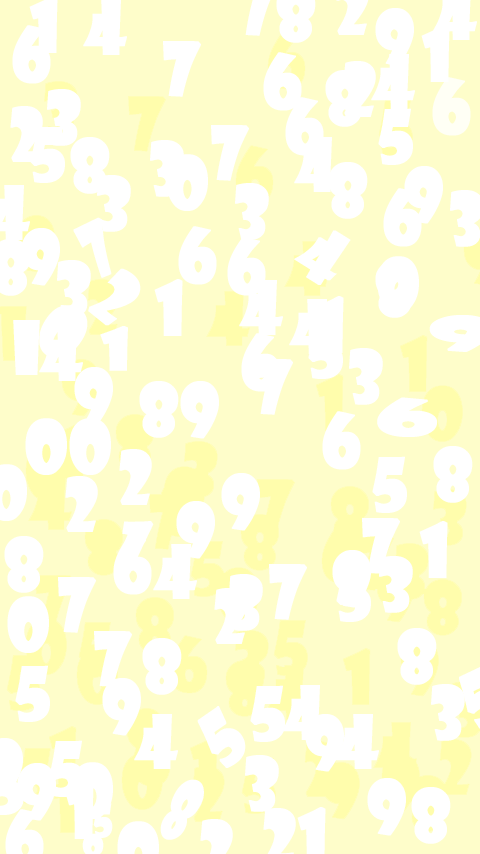
<style>
.page{position:relative;width:480px;height:854px;background:#fefdca}
.page>*{position:absolute;margin:0}
.t1{font:72px "ShowcardGothic-Reg";color:#ffffff;font-weight:bold}
.t2{font:72.3px "ShowcardGothic-Reg";color:#ffffff;font-weight:bold;scale:0.81 1}
.t3{font:56.6px "ShowcardGothic-Reg";color:#ffffff;font-weight:bold;scale:1.27 1}
.t4{font:47.3px "ShowcardGothic-Reg";color:#ffffff;font-weight:bold;scale:2.45 1}
.t5{font:85.3px "ShowcardGothic-Reg";color:#ffffff;font-weight:bold;scale:0.61 1}
.t6{font:44.8px "ShowcardGothic-Reg";color:#ffffff;font-weight:bold;scale:0.86 1}
</style>
<div class="page">
<p class="t1" style="left:83px;top:0px;width:44px;height:55px">4</p>
<p class="t1" style="left:375px;top:8px;width:39px;height:58px">9</p>
<p class="t1" style="left:12px;top:25px;width:39px;height:59px">6</p>
<p class="t1" style="left:421px;top:25px;width:29px;height:57px">1</p>
<p class="t1" style="left:163px;top:41px;width:38px;height:56px">7</p>
<p class="t1" style="left:263px;top:52px;width:39px;height:59px">6</p>
<p class="t1" style="left:371px;top:54px;width:44px;height:55px">4</p>
<p class="t1" style="left:343px;top:61px;width:33px;height:56px">2</p>
<p class="t1" style="left:325px;top:70px;width:40px;height:57px">8</p>
<p class="t1" style="left:432px;top:77px;width:39px;height:59px;opacity:0.8">6</p>
<p class="t1" style="left:47px;top:89px;width:34px;height:57px">3</p>
<p class="t1" style="left:285px;top:97px;width:39px;height:59px">6</p>
<p class="t1" style="left:10px;top:106px;width:33px;height:56px">2</p>
<p class="t1" style="left:378px;top:108px;width:35px;height:57px">5</p>
<p class="t1" style="left:30px;top:126px;width:35px;height:57px">5</p>
<p class="t1" style="left:211px;top:125px;width:38px;height:56px">7</p>
<p class="t1" style="left:70px;top:137px;width:40px;height:57px">8</p>
<p class="t1" style="left:294px;top:137px;width:44px;height:55px">4</p>
<p class="t1" style="left:150px;top:140px;width:34px;height:57px">3</p>
<p class="t1" style="left:166px;top:154px;width:42px;height:57px">0</p>
<p class="t1" style="left:328px;top:162px;width:40px;height:57px">8</p>
<p class="t1" style="left:404px;top:166px;width:39px;height:58px">9</p>
<p class="t1" style="left:97px;top:175px;width:34px;height:57px">3</p>
<p class="t1" style="left:235px;top:183px;width:34px;height:57px">3</p>
<p class="t1" style="left:383px;top:188px;width:39px;height:59px">6</p>
<p class="t2" style="left:73px;top:217px;width:39px;height:61px;rotate:-26deg">7</p>
<p class="t1" style="left:21px;top:228px;width:39px;height:58px">9</p>
<p class="t1" style="left:178px;top:226px;width:39px;height:59px">6</p>
<p class="t1" style="left:294px;top:230px;width:57px;height:55px;rotate:32deg">4</p>
<p class="t1" style="left:227px;top:237px;width:39px;height:59px">6</p>
<p class="t1" style="left:377px;top:256px;width:42px;height:57px">0</p>
<p class="t1" style="left:57px;top:260px;width:34px;height:57px">3</p>
<p class="t1" style="left:88px;top:268px;width:53px;height:58px;rotate:39deg">2</p>
<p class="t1" style="left:375px;top:261px;width:40px;height:57px">8</p>
<p class="t1" style="left:154px;top:279px;width:29px;height:57px">1</p>
<p class="t1" style="left:239px;top:280px;width:44px;height:55px">4</p>
<p class="t1" style="left:39px;top:305px;width:49px;height:53px;rotate:34deg">0</p>
<p class="t1" style="left:289px;top:299px;width:44px;height:55px">4</p>
<p class="t1" style="left:315px;top:296px;width:29px;height:57px">1</p>
<p class="t1" style="left:13px;top:320px;width:27px;height:55px">i</p>
<p class="t1" style="left:39px;top:326px;width:44px;height:55px">4</p>
<p class="t3" style="left:100px;top:326px;width:28px;height:45px">1</p>
<p class="t1" style="left:308px;top:322px;width:35px;height:57px">5</p>
<p class="t1" style="left:241px;top:333px;width:39px;height:59px">6</p>
<p class="t1" style="left:349px;top:348px;width:34px;height:57px">3</p>
<p class="t1" style="left:255px;top:359px;width:38px;height:56px">7</p>
<p class="t1" style="left:74px;top:367px;width:39px;height:58px">9</p>
<p class="t1" style="left:139px;top:381px;width:80px;height:58px">89</p>
<p class="t4" style="left:377px;top:397px;width:60px;height:40px">6</p>
<p class="t1" style="left:322px;top:411px;width:39px;height:59px">6</p>
<p class="t1" style="left:25px;top:418px;width:86px;height:57px">00</p>
<p class="t1" style="left:119px;top:449px;width:33px;height:56px">2</p>
<p class="t1" style="left:433px;top:446px;width:40px;height:57px">8</p>
<p class="t1" style="left:372px;top:456px;width:35px;height:57px">5</p>
<p class="t1" style="left:221px;top:473px;width:39px;height:58px">9</p>
<p class="t1" style="left:65px;top:476px;width:33px;height:56px">2</p>
<p class="t1" style="left:176px;top:501px;width:39px;height:58px">9</p>
<p class="t1" style="left:113px;top:521px;width:41px;height:53px;rotate:24deg">1</p>
<p class="t1" style="left:362px;top:518px;width:38px;height:56px">7</p>
<p class="t1" style="left:419px;top:521px;width:29px;height:57px">1</p>
<p class="t1" style="left:4px;top:536px;width:40px;height:57px">8</p>
<p class="t1" style="left:113px;top:536px;width:39px;height:59px">6</p>
<p class="t1" style="left:153px;top:544px;width:44px;height:55px">4</p>
<p class="t1" style="left:332px;top:550px;width:39px;height:58px">9</p>
<p class="t1" style="left:379px;top:556px;width:34px;height:57px">3</p>
<p class="t1" style="left:269px;top:564px;width:38px;height:56px">7</p>
<p class="t1" style="left:336px;top:565px;width:35px;height:57px">5</p>
<p class="t1" style="left:58px;top:577px;width:38px;height:56px">7</p>
<p class="t1" style="left:229px;top:574px;width:34px;height:57px">3</p>
<p class="t1" style="left:214px;top:588px;width:33px;height:56px">2</p>
<p class="t1" style="left:7px;top:596px;width:42px;height:57px">0</p>
<p class="t1" style="left:397px;top:628px;width:40px;height:57px">8</p>
<p class="t1" style="left:94px;top:631px;width:38px;height:56px">7</p>
<p class="t1" style="left:142px;top:638px;width:40px;height:57px">8</p>
<p class="t1" style="left:15px;top:665px;width:35px;height:57px">5</p>
<p class="t1" style="left:102px;top:678px;width:39px;height:58px">9</p>
<p class="t1" style="left:250px;top:685px;width:35px;height:57px">5</p>
<p class="t1" style="left:282px;top:685px;width:44px;height:55px">4</p>
<p class="t1" style="left:431px;top:684px;width:34px;height:57px">3</p>
<p class="t1" style="left:197px;top:706px;width:49px;height:62px;rotate:-35deg">5</p>
<p class="t1" style="left:134px;top:714px;width:44px;height:55px">4</p>
<p class="t1" style="left:305px;top:714px;width:39px;height:58px">9</p>
<p class="t1" style="left:335px;top:714px;width:44px;height:55px">4</p>
<p class="t1" style="left:49px;top:740px;width:35px;height:57px">5</p>
<p class="t1" style="left:245px;top:755px;width:34px;height:57px">3</p>
<p class="t1" style="left:17px;top:763px;width:39px;height:58px">9</p>
<p class="t1" style="left:71px;top:762px;width:42px;height:57px">0</p>
<p class="t1" style="left:65px;top:782px;width:29px;height:57px">1</p>
<p class="t5" style="left:160px;top:779px;width:44px;height:61px;rotate:29deg">8</p>
<p class="t1" style="left:367px;top:778px;width:39px;height:58px">9</p>
<p class="t1" style="left:411px;top:787px;width:40px;height:57px">8</p>
<p class="t6" style="left:93px;top:803px;width:20px;height:35px">5</p>
</div>
